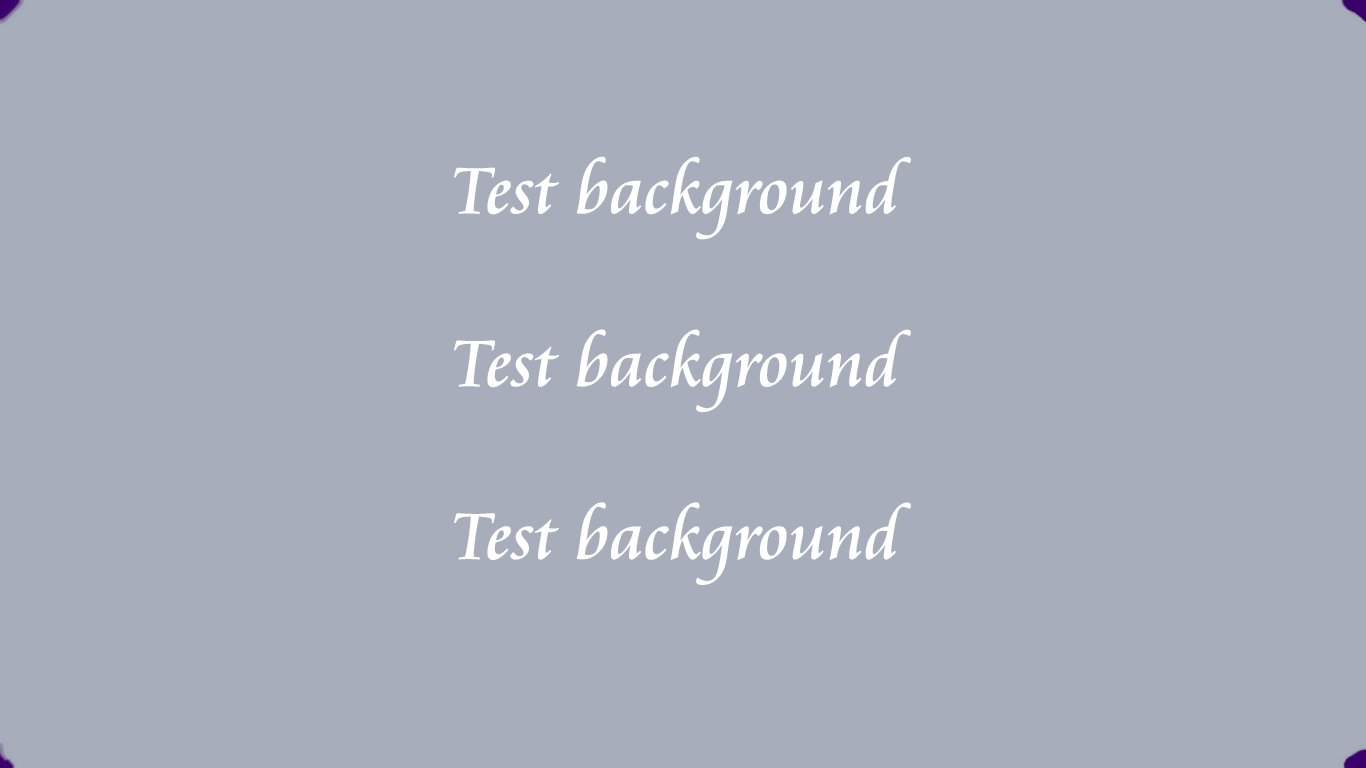
<style>
.page{position:relative;width:1366px;height:768px;background:#a7adba}
.page>*{position:absolute;margin:0}
.t1{font:72px "CataneoBT-Regular";color:#ffffff}
</style>
<div class="page">
<p class="t1" style="left:454px;top:156px;width:457px;height:429px;text-align:center">Test background<br><br>Test background<br><br>Test background</p>
</div>
